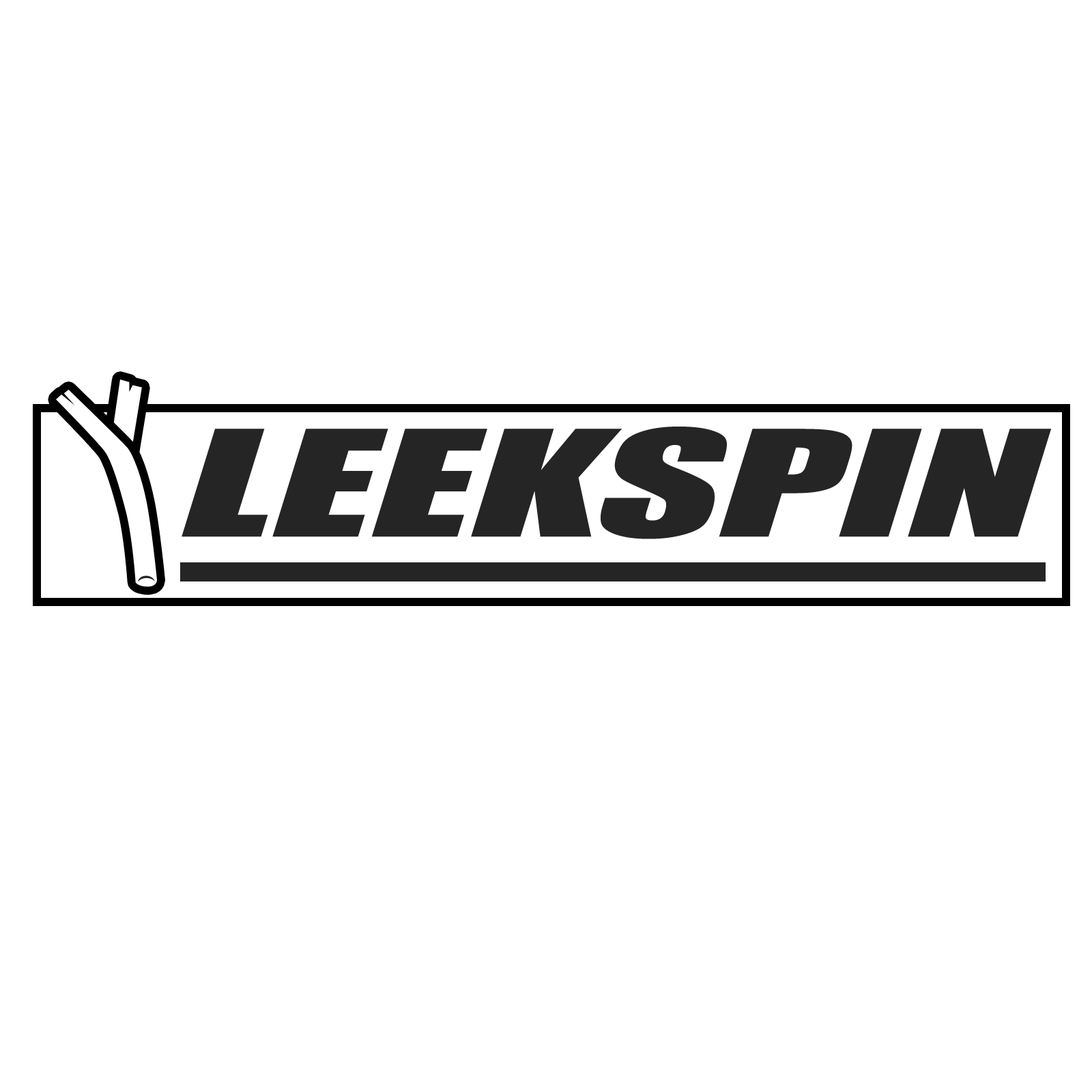
<style>
.page{position:relative;width:1092px;height:1092px;background:#ffffff}
.page>*{position:absolute;margin:0}
.t1{font:136.1px "Impact";color:#252525;font-style:italic;scale:1.75 1}
</style>
<div class="page">
<p class="t1" style="left:182px;top:427px;width:869px;height:112px">LEEKSPIN</p>
</div>
